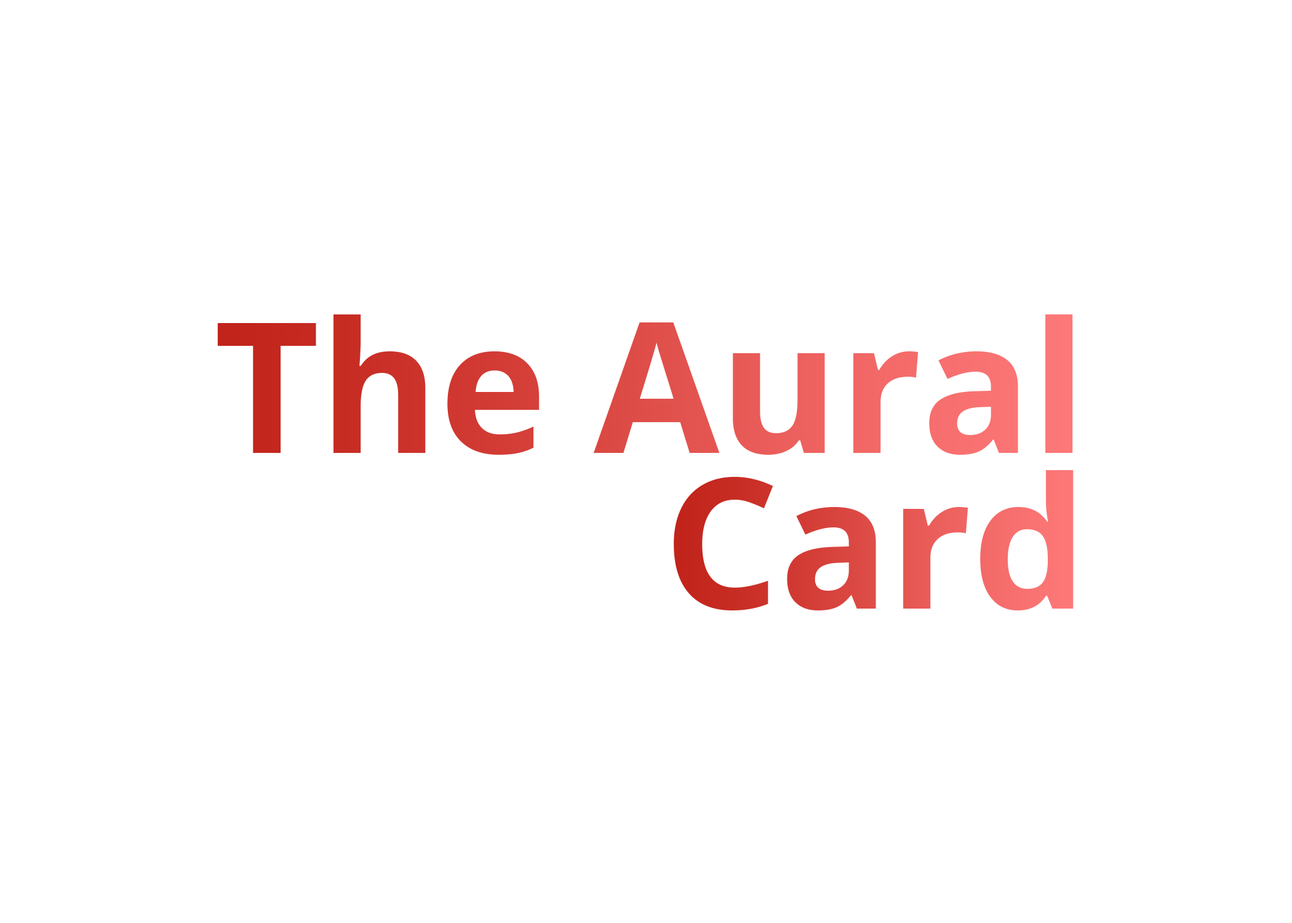
<style>
.page{position:relative;width:1292px;height:923px;background:#ffffff}
.page>*{position:absolute;margin:0}
.t1{font:181.9px "OpenSans-Bold"}
</style>
<div class="page">
<p class="t1" style="left:217px;top:314px;width:856px;height:141px">The Aural</p>
<p class="t1" style="left:674px;top:470px;width:400px;height:140px">Card</p>
</div>
